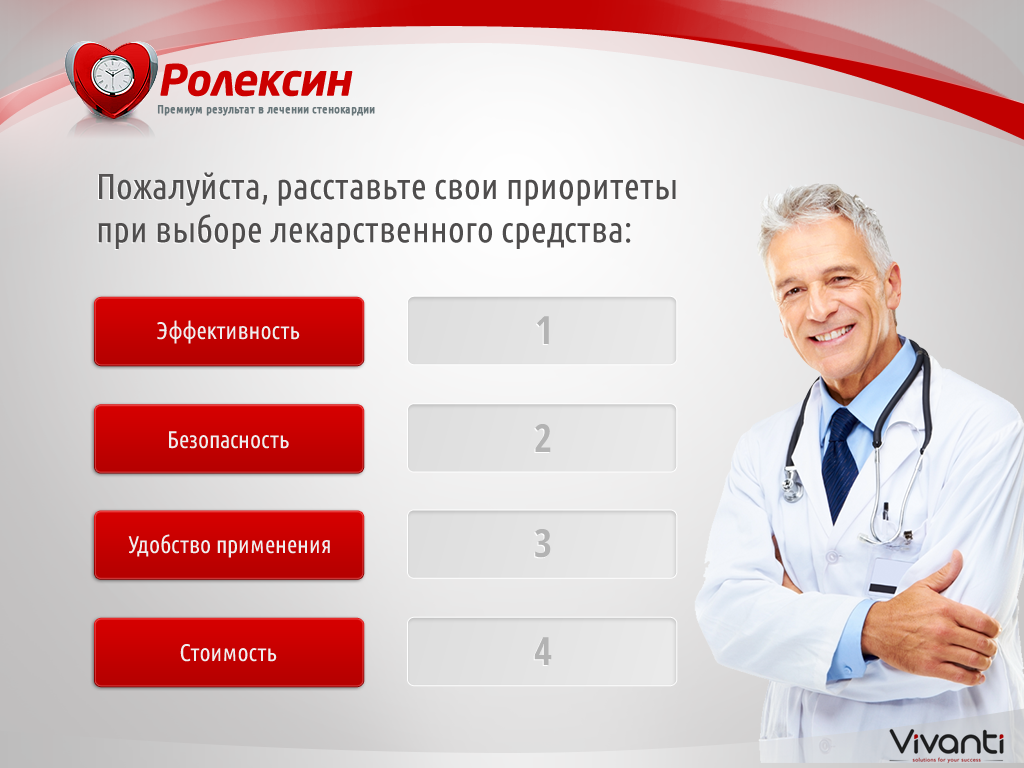
<style>
.page{position:relative;width:1024px;height:768px}
.page>*{position:absolute;margin:0}
.t1{font:43px "NeoSansPro-BoldItalic";letter-spacing:-0.015em;color:#cc0000}
.t2{font:12px "UbuntuCondensed-Regular";color:#677579;font-weight:bold}
.t3{font:36px/43.2px "UbuntuCondensed-Regular";color:#4f4d4d}
.t4{font:38.8px "OpenSans-CondensedBold";color:#b3b3b3}
.t5{font:24px "UbuntuCondensed-Regular";color:#efeeef}
</style>
<div class="page">
<p class="t1" style="left:160px;top:63px;width:193px;height:34px">Ролексин</p>
<p class="t2" style="left:157px;top:105px;width:218px;height:11px">Премиум результат в лечении стенокардии</p>
<p class="t3" style="left:98px;top:172px;width:578px;height:77px">Пожалуйста, расставьте свои приоритеты <br>при выборе лекарственного средства:</p>
<p class="t4" style="left:537px;top:316px;width:12px;height:28px">1</p>
<p class="t5" style="left:157px;top:320px;width:143px;height:24px">Эффективность</p>
<p class="t4" style="left:535px;top:424px;width:16px;height:28px">2</p>
<p class="t5" style="left:169px;top:431px;width:120px;height:18px">Безопасность</p>
<p class="t5" style="left:128px;top:534px;width:202px;height:24px">Удобство применения</p>
<p class="t4" style="left:535px;top:529px;width:16px;height:29px">3</p>
<p class="t4" style="left:534px;top:637px;width:18px;height:28px">4</p>
<p class="t5" style="left:180px;top:644px;width:97px;height:18px">Стоимость</p>
</div>
